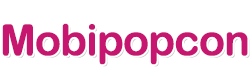
<style>
.page{position:relative;width:250px;height:78px;background:#ffffff}
.page>*{position:absolute;margin:0}
.t1{font:42.9px "ArialRoundedMTBold";letter-spacing:-0.045em;color:#c7166f;font-weight:bold}
</style>
<div class="page">
<p class="t1" style="left:2px;top:23px;width:246px;height:42px">Mobipopcon</p>
</div>
